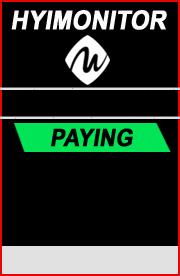
<style>
.page{position:relative;width:180px;height:276px;background:#000000}
.page>*{position:absolute;margin:0}
.t1{font:26px "Arial-BoldMT";color:#fbfbfb;font-weight:bold;font-style:italic;scale:0.9 1}
.t2{font:24px "Arial-BoldMT";color:#020202;font-weight:bold;font-style:italic;scale:0.9 1}
</style>
<div class="page">
<p class="t1" style="left:11px;top:10px;width:156px;height:20px">HYIMONITOR</p>
<p class="t2" style="left:51px;top:128px;width:82px;height:19px">PAYING</p>
</div>
